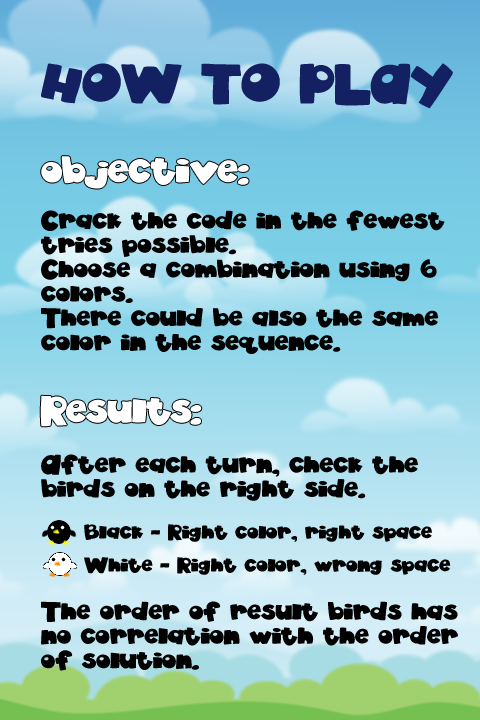
<style>
.page{position:relative;width:480px;height:720px}
.page>*{position:absolute;margin:0}
.t1{font:40px "akaDylanPlain";color:#132062}
.t2{font:30px "akaDylanPlain";color:#ffffff}
.t3{font:20px/24.3px "akaDylanPlain";color:#010101}
.t4{font:16px "akaDylanPlain";color:#010101}
</style>
<div class="page">
<p class="t1" style="left:41px;top:63px;width:412px;height:46px">HOW TO PLAY</p>
<p class="t2" style="left:41px;top:156px;width:208px;height:33px">objective:</p>
<p class="t3" style="left:41px;top:210px;width:404px;height:144px">Crack the code in the fewest <br>tries possible. <br>Choose a combination using 6<br>colors.<br>There could be also the same<br>color in the sequence.</p>
<p class="t2" style="left:40px;top:395px;width:162px;height:32px">Results:</p>
<p class="t3" style="left:41px;top:454px;width:377px;height:47px">After each turn, check the <br>birds on the right side.</p>
<p class="t4" style="left:84px;top:524px;width:348px;height:18px">Black - Right color, right space</p>
<p class="t4" style="left:84px;top:557px;width:367px;height:18px">White - Right color, wrong space</p>
<p class="t3" style="left:41px;top:601px;width:417px;height:70px">The order of result birds has<br>no correlation with the order<br>of solution.</p>
</div>
